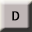
<style>
.page{position:relative;width:32px;height:32px;background:#bfb6b6}
.page>*{position:absolute;margin:0}
.t1{font:14px "Consolas";color:#000000;font-weight:bold}
</style>
<div class="page">
<p class="t1" style="left:12px;top:11px;width:8px;height:10px">D</p>
</div>
